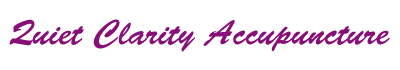
<style>
.page{position:relative;width:400px;height:70px;background:#ffffff}
.page>*{position:absolute;margin:0}
.t1{font:35px "BrushScriptStd";color:#880f78}
</style>
<div class="page">
<p class="t1" style="left:9px;top:19px;width:381px;height:33px">Quiet Clarity Accupuncture</p>
</div>
